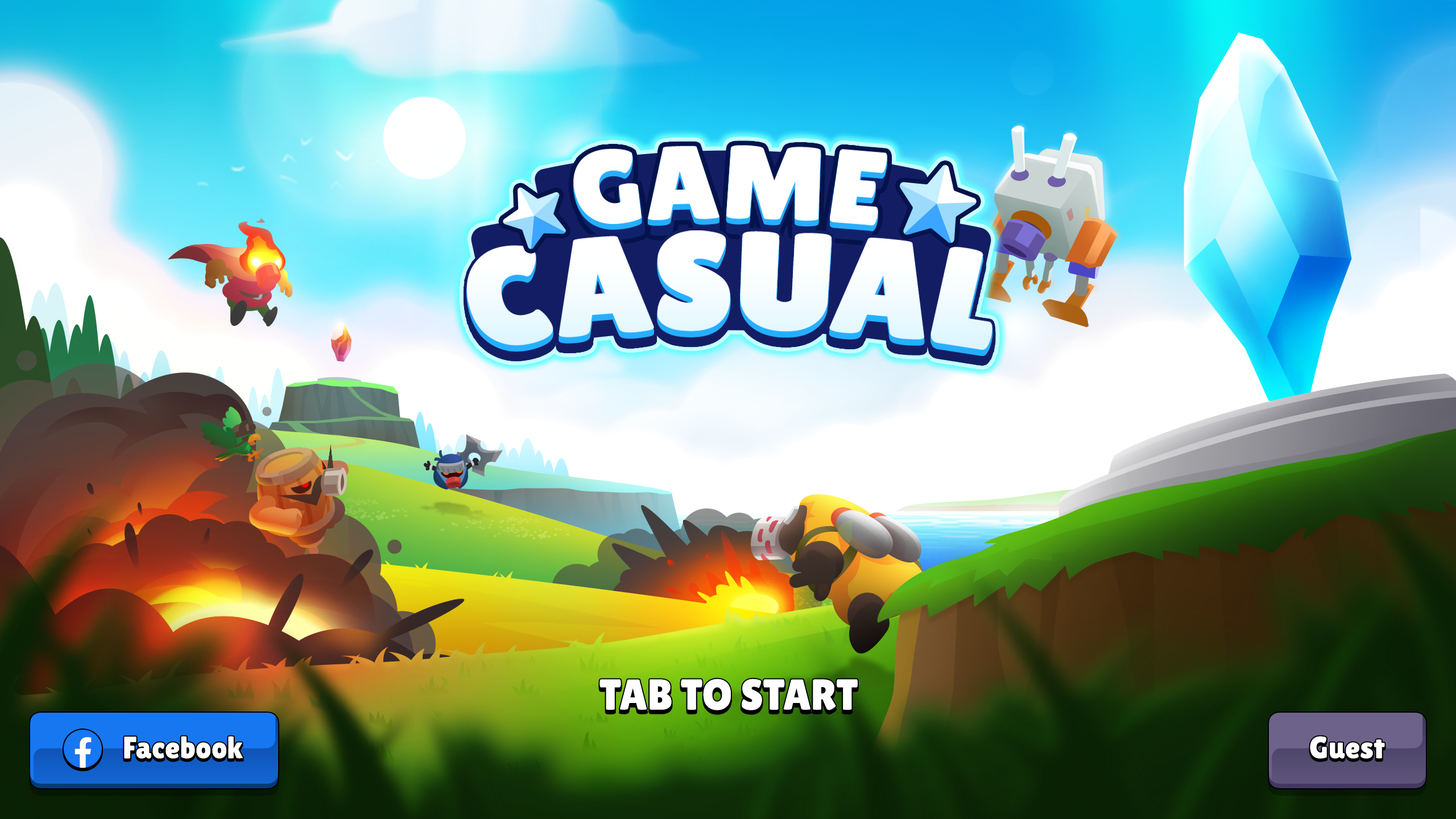
<style>
.page{position:relative;width:1456px;height:819px}
.page>*{position:absolute;margin:0}
.t1{font:43.2px "LilitaOne";color:#ffffff;text-transform:uppercase}
.t2{font:30.7px "LilitaOne";letter-spacing:0.02em;color:#ffffff}
</style>
<div class="page">
<p class="t1" style="left:599px;top:679px;width:259px;height:31px">Tab to Start</p>
<p class="t2" style="left:124px;top:736px;width:119px;height:23px">Facebook</p>
<p class="t2" style="left:1310px;top:736px;width:75px;height:23px">Guest</p>
</div>
